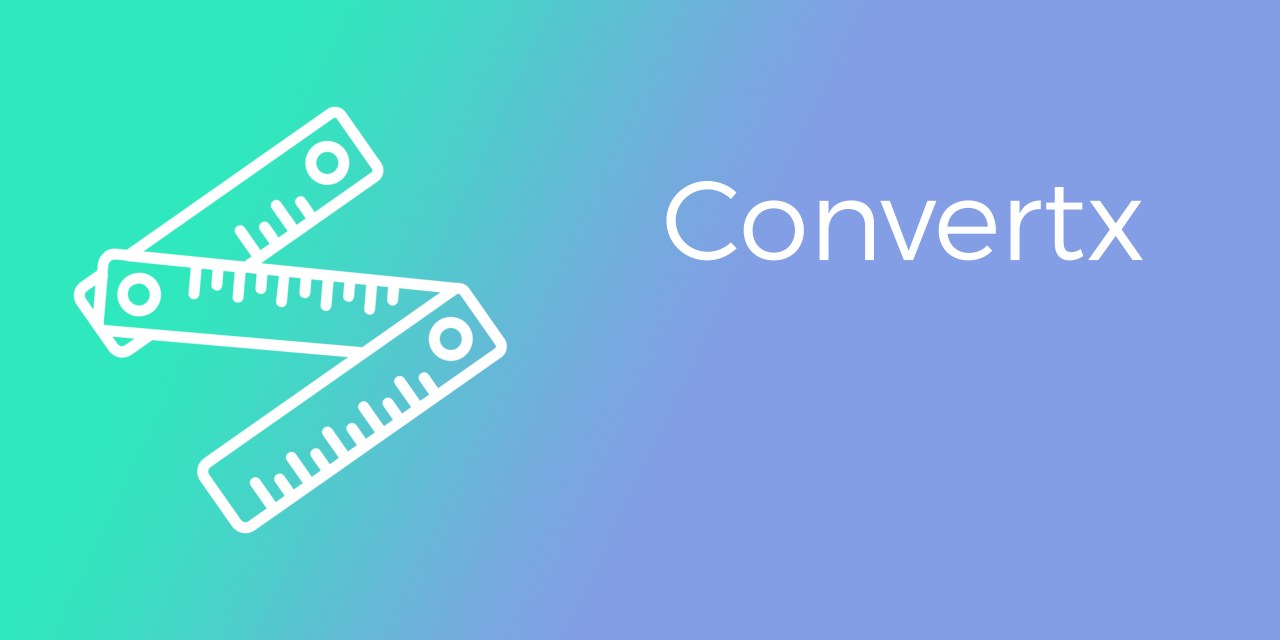
<style>
.page{position:relative;width:1280px;height:640px;background:#839ee5}
.page>*{position:absolute;margin:0}
.t1{font:112.5px "Montserrat-Light";color:#ffffff}
</style>
<div class="page">
<p class="t1" style="left:666px;top:181px;width:477px;height:80px">Convertx</p>
</div>
